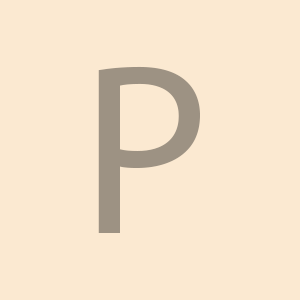
<style>
.page{position:relative;width:300px;height:300px;background:#fbe9d1}
.page>*{position:absolute;margin:0}
.t1{font:244.6px "MyriadPro-Regular";color:#9d9283}
</style>
<div class="page">
<p class="t1" style="left:98px;top:66px;width:102px;height:167px">P</p>
</div>
